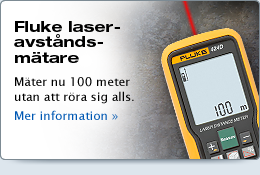
<style>
.page{position:relative;width:260px;height:175px}
.page>*{position:absolute;margin:0}
.t1{font:15px/15.5px "HelveticaNeueLTStd-BdEx";color:#000000}
.t2{font:12px "LucidaSans";color:#000000}
.t3{font:12px/14.4px "LucidaSans";color:#0058b3}
</style>
<div class="page">
<p class="t1" style="left:14px;top:21px;width:106px;height:42px">Fluke laseravstånds-<br>mätare</p>
<p class="t2" style="left:15px;top:77px;width:119px;height:43px">Mäter nu 100 meter utan att röra sig alls.<br><span class="t3">Mer information »</span></p>
</div>
